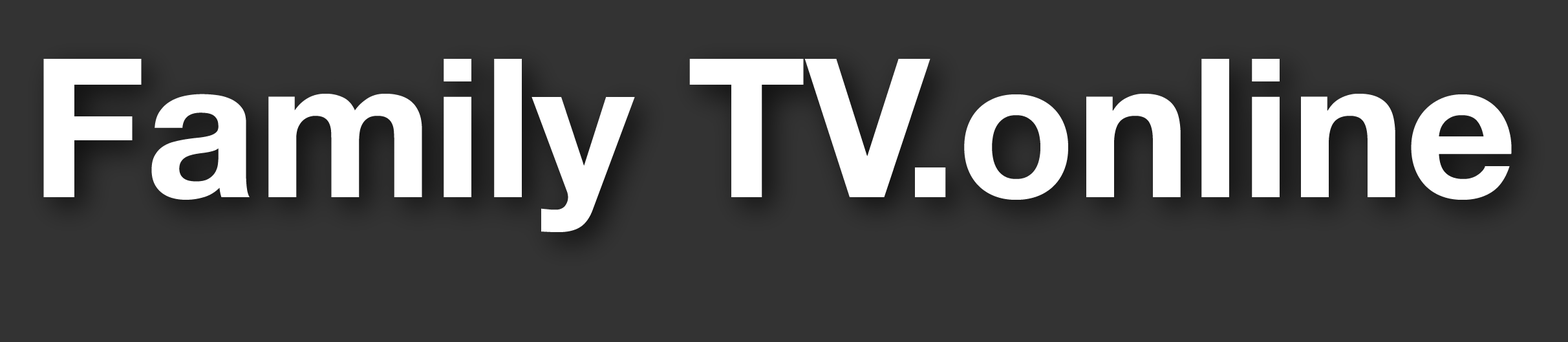
<style>
.page{position:relative;width:1568px;height:342px;background:#333333}
.page>*{position:absolute;margin:0}
.t1{font:194px "HelveticaNeue-Bold";color:#ffffff}
</style>
<div class="page">
<p class="t1" style="left:43px;top:59px;width:1469px;height:173px">Family TV.online</p>
</div>
